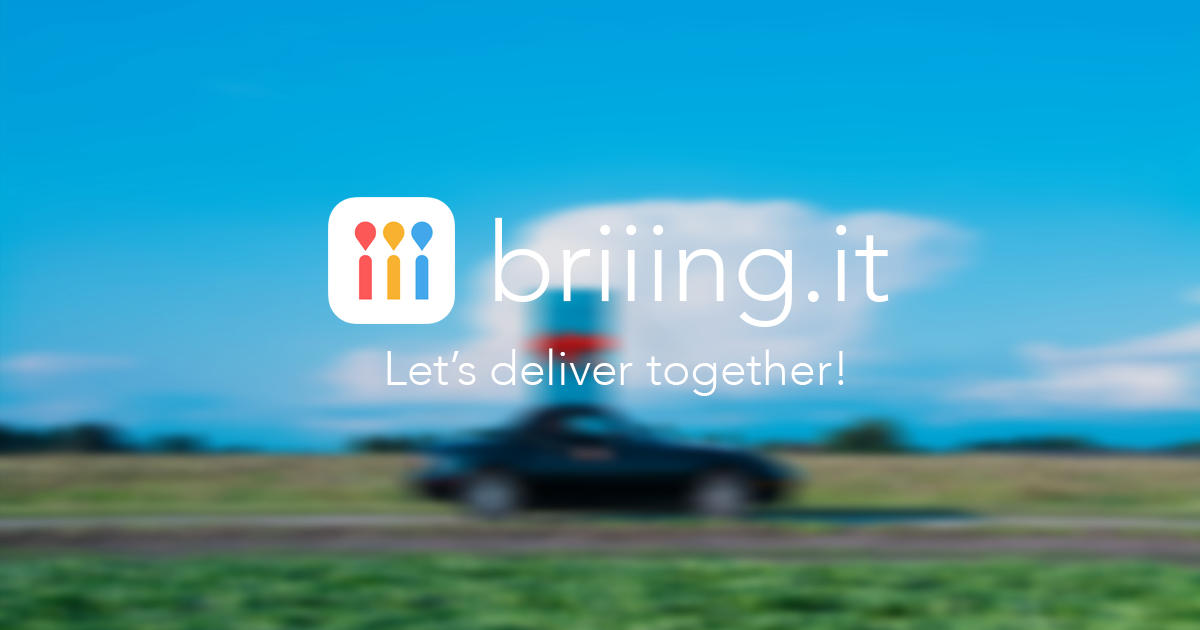
<style>
.page{position:relative;width:1200px;height:630px}
.page>*{position:absolute;margin:0}
.t1{font:110px "Avenir-Light";color:#ffffff}
.t2{font:48px "Avenir-Light";color:#ffffff}
</style>
<div class="page">
<p class="t1" style="left:495px;top:217px;width:394px;height:110px">briiing.it</p>
<p class="t2" style="left:387px;top:348px;width:457px;height:48px">Let’s deliver together!</p>
</div>
